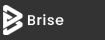
<style>
.page{position:relative;width:105px;height:40px;background:#333333}
.page>*{position:absolute;margin:0}
.t1{font:14px "Poppins-Medium";letter-spacing:0.05em;color:#ffffff}
</style>
<div class="page">
<p class="t1" style="left:27px;top:14px;width:37px;height:12px">Brise</p>
</div>
